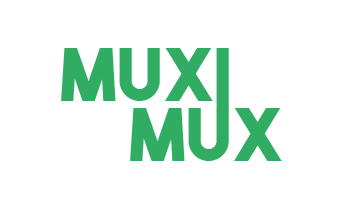
<style>
.page{position:relative;width:341px;height:207px;background:#ffffff}
.page>*{position:absolute;margin:0}
.t1{font:72px "TheBoldFont";letter-spacing:0.015em;color:#31ac63}
</style>
<div class="page">
<p class="t1" style="left:61px;top:48px;width:168px;height:53px">muxi</p>
<p class="t1" style="left:130px;top:108px;width:152px;height:53px">mux</p>
</div>
